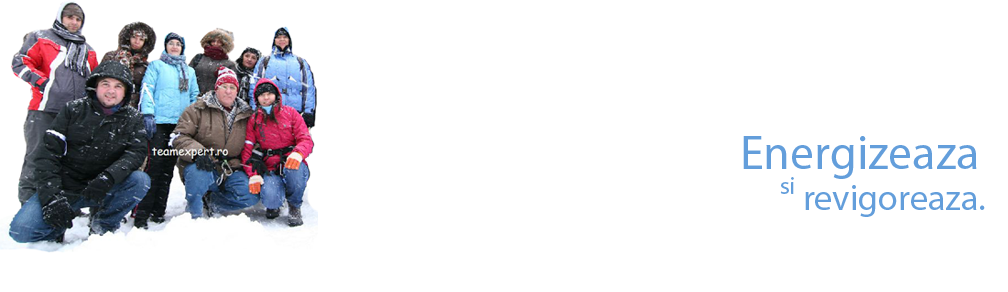
<style>
.page{position:relative;width:1008px;height:292px;background:#ffffff}
.page>*{position:absolute;margin:0}
.t1{font:48px "MyriadPro-Regular";color:#639edb}
.t2{font:24px "MyriadPro-Regular";color:#639edb}
.t3{font:36px "MyriadPro-Regular";color:#639edb}
</style>
<div class="page">
<p class="t1" style="left:743px;top:136px;width:234px;height:43px">Energizeaza</p>
<p class="t2" style="left:780px;top:177px;width:14px;height:17px">si</p>
<p class="t3" style="left:805px;top:185px;width:180px;height:32px">revigoreaza.</p>
</div>
